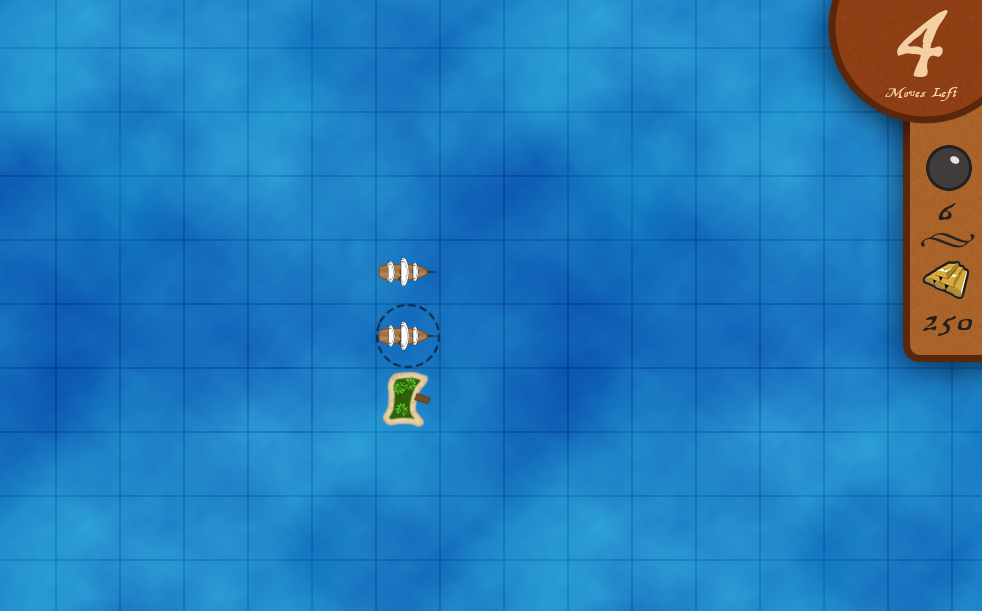
<style>
.page{position:relative;width:982px;height:611px}
.page>*{position:absolute;margin:0}
.t1{font:16px/21px "TreasureMapDeadhand";color:#f2d0a3}
.t2{font:120px/21px "TreasureMapDeadhand";color:#f2d0a3}
.t3{font:36px "TreasureMapDeadhand";color:#212020}
</style>
<div class="page">
<p class="t1" style="left:885px;top:10px;width:73px;height:92px;text-align:center"><span class="t2">4<br><br></span>Moves Left</p>
<p class="t3" style="left:938px;top:203px;width:18px;height:17px">6</p>
<p class="t3" style="left:922px;top:316px;width:51px;height:20px">250</p>
</div>
